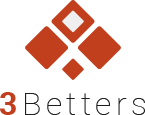
<style>
.page{position:relative;width:145px;height:115px;background:#ffffff}
.page>*{position:absolute;margin:0}
.t1{font:32px "Roboto-Thin";letter-spacing:0.14em;color:#1d1d1d}
.t2{font:32px "Roboto-Bold";letter-spacing:0.14em;color:#c23f1d}
</style>
<div class="page">
<p class="t1" style="left:0px;top:92px;width:145px;height:23px"><span class="t2">3</span>Betters</p>
</div>
